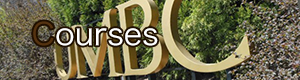
<style>
.page{position:relative;width:300px;height:80px}
.page>*{position:absolute;margin:0}
.t1{font:31px "HiraKakuPro-W3";color:#ffffff}
.t2{font:31px "HiraKakuPro-W3";color:#553311}
</style>
<div class="page">
<p class="t1" style="left:33px;top:21px;width:125px;height:25px"><span class="t2">C</span>ourses</p>
</div>
